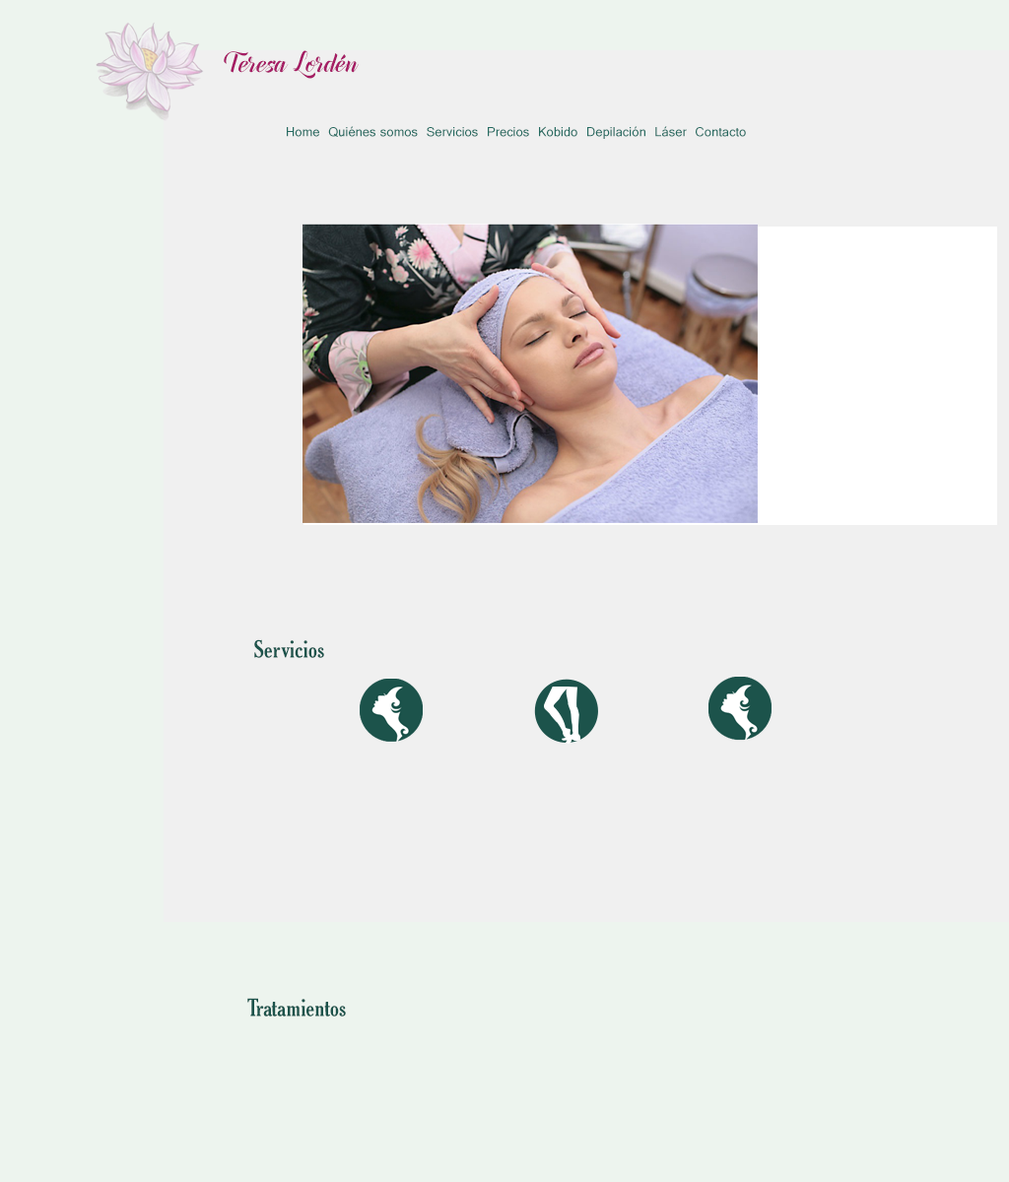
<style>
.page{position:relative;width:1009px;height:1182px;background:#f0f0f0}
.page>*{position:absolute;margin:0}
.t1{font:35.5px "CanelaBarkBoldPersonalUse";color:#a51c64}
.t2{font:13.8px "Gautami";color:#266b61}
.t3{font:23.6px "Thyssen-J";color:#1c534b}
</style>
<div class="page">
<p class="t1" style="left:224px;top:50px;width:135px;height:29px">Teresa Lordén</p>
<p class="t2" style="left:287px;top:126px;width:459px;height:13px">Home  Quiénes somos  Servicios  Precios  Kobido  Depilación  Láser  Contacto</p>
<p class="t3" style="left:254px;top:639px;width:70px;height:19px">Servicios</p>
<p class="t3" style="left:247px;top:998px;width:99px;height:19px">Tratamientos</p>
</div>
